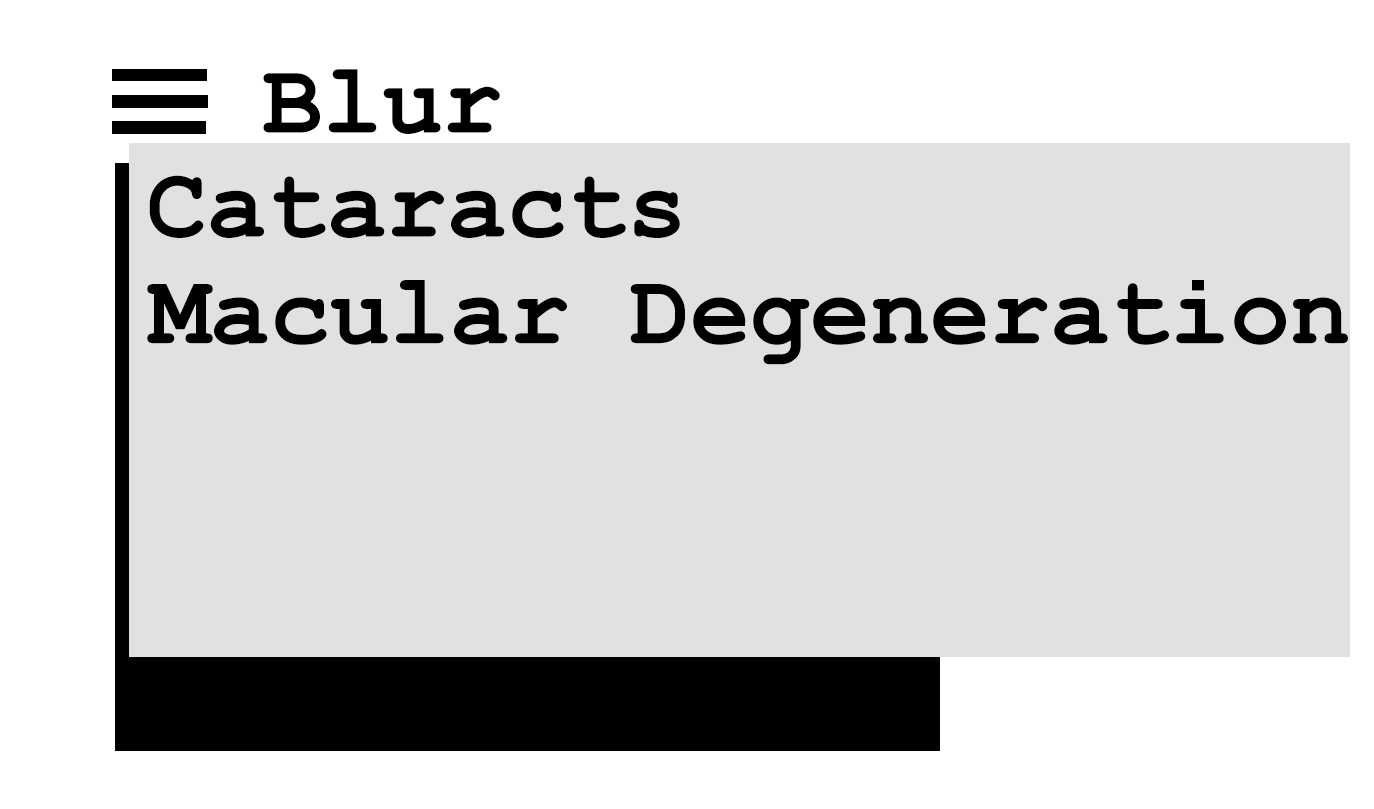
<style>
.page{position:relative;width:1374px;height:809px;background:#e1e1e1}
.page>*{position:absolute;margin:0}
.t1{font:100px "CourierNewPS-BoldMT";color:#000000}
</style>
<div class="page">
<p class="t1" style="left:263px;top:69px;width:237px;height:65px">Blur</p>
<p class="t1" style="left:149px;top:175px;width:531px;height:63px">Cataracts</p>
<p class="t1" style="left:147px;top:280px;width:1201px;height:85px">Macular Degeneration</p>
</div>
